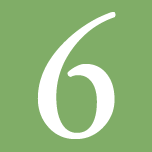
<style>
.page{position:relative;width:152px;height:152px;background:#80ad67}
.page>*{position:absolute;margin:0}
.t1{font:180px "HoeflerText-Regular";color:#ffffff}
</style>
<div class="page">
<p class="t1" style="left:37px;top:12px;width:79px;height:127px">6</p>
</div>
